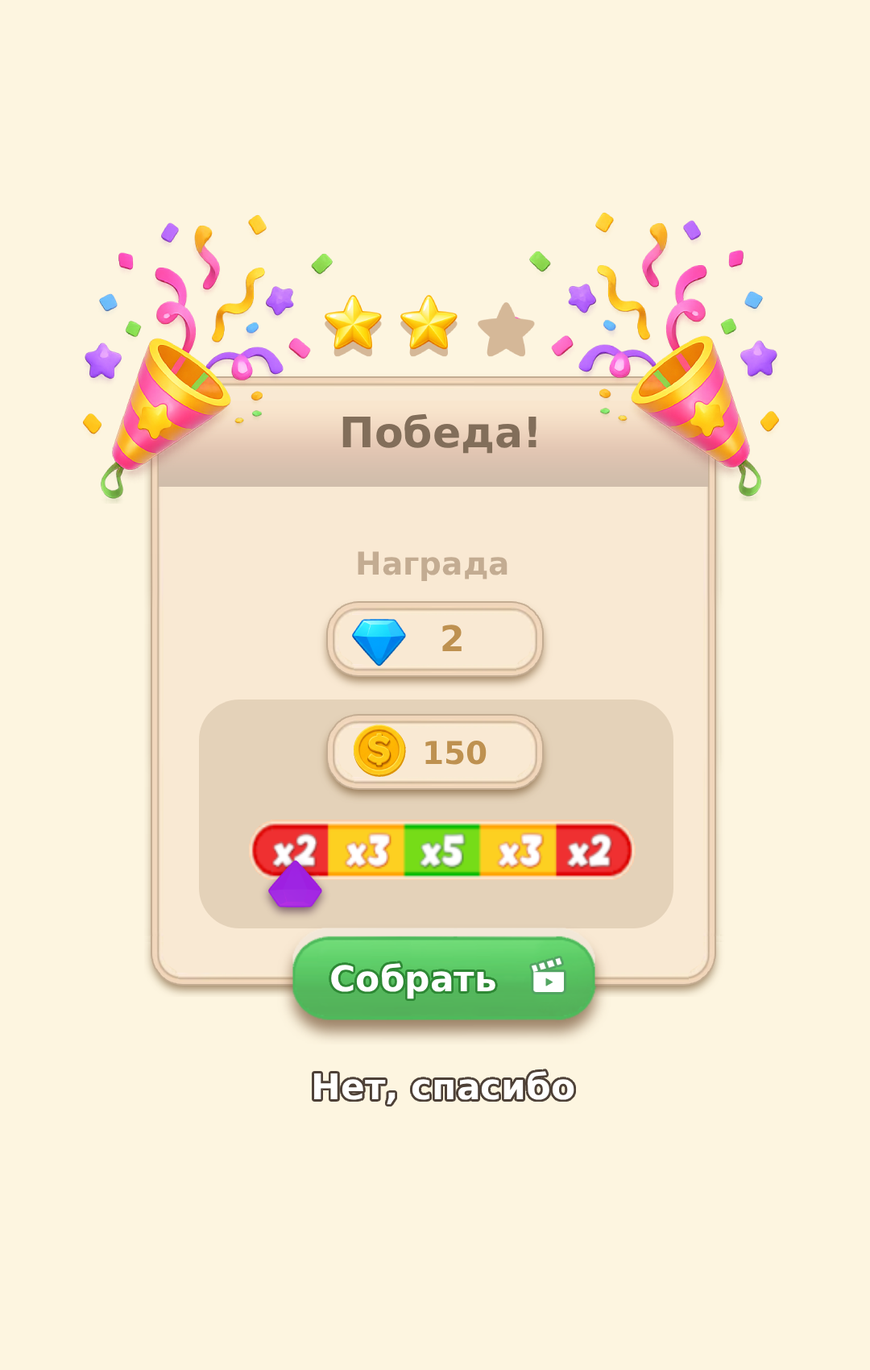
<style>
.page{position:relative;width:870px;height:1370px;background:#fdf5e0}
.page>*{position:absolute;margin:0}
.t1{font:41.9px "DejaVuSans-Bold";color:#826e5a}
.t2{font:31.4px "DejaVuSans-Bold";color:#c3ac92}
.t3{font:35.5px "DejaVuSans-Bold";color:#be9150}
.t4{font:31.4px "DejaVuSans-Bold";color:#be9150}
.t5{font:35.5px "DejaVuSans-Bold";color:#ffffff}
</style>
<div class="page">
<p class="t1" style="left:343px;top:413px;width:194px;height:41px">Победа!</p>
<p class="t2" style="left:358px;top:551px;width:150px;height:31px">Награда</p>
<p class="t3" style="left:442px;top:625px;width:20px;height:26px">2</p>
<p class="t4" style="left:426px;top:741px;width:61px;height:24px">150</p>
<p class="t5" style="left:331px;top:963px;width:165px;height:36px">Собрать</p>
<p class="t5" style="left:314px;top:1071px;width:261px;height:34px">Нет, спасибо</p>
</div>
